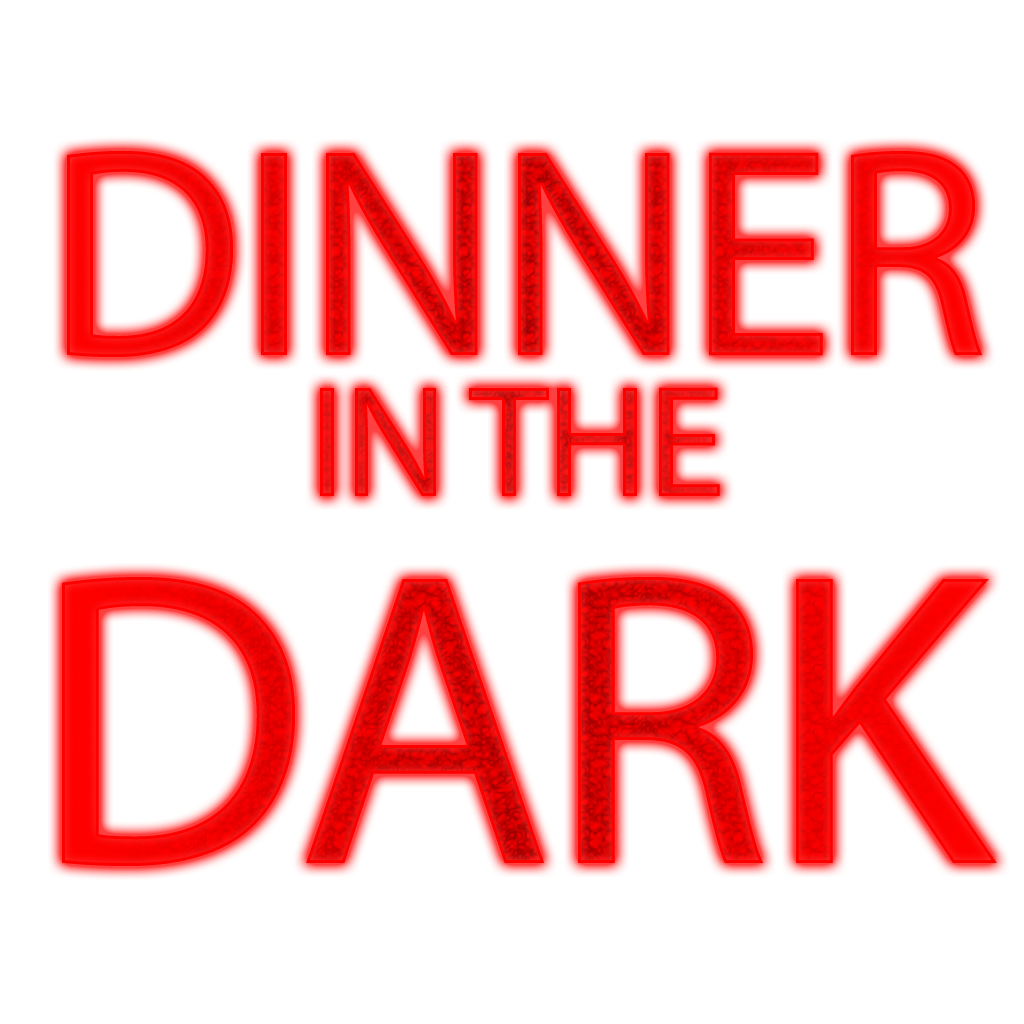
<style>
.page{position:relative;width:1024px;height:1024px;background:#ffffff}
.page>*{position:absolute;margin:0}
.t1{font:300px/160px "MyriadPro-Regular";letter-spacing:-0.02em;color:#ff0000}
.t2{font:160px/141px "MyriadPro-Regular";letter-spacing:-0.02em;color:#ff0000}
.t3{font:421.5px "MyriadPro-Regular";letter-spacing:-0.02em;color:#ff0000}
</style>
<div class="page">
<p class="t1" style="left:67px;top:150px;width:916px;height:346px;text-align:center">DINNER<br><span class="t2">IN THE</span></p>
<p class="t3" style="left:62px;top:577px;width:935px;height:289px">DARK</p>
</div>
